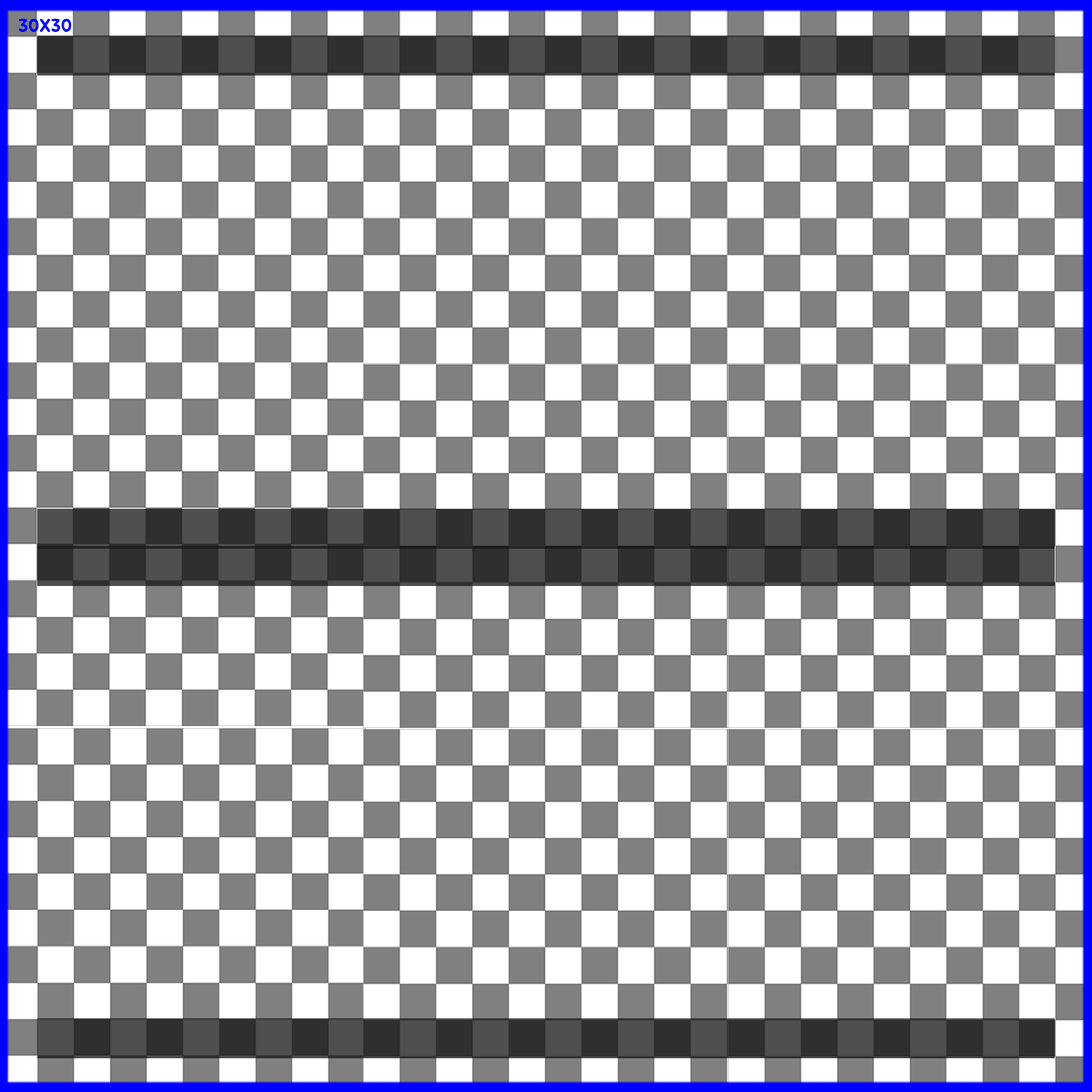
<style>
.page{position:relative;width:1092px;height:1092px;background:#ffffff}
.page>*{position:absolute;margin:0}
.t1{font:18.2px "BMJUA";color:#0000ff}
</style>
<div class="page">
<p class="t1" style="left:18px;top:18px;width:54px;height:15px">30X30</p>
</div>
